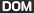
<style>
.page{position:relative;width:34px;height:13px}
.page>*{position:absolute;margin:0}
.t1{font:13.9px "K2D-ExtraBold";color:#ffffff}
</style>
<div class="page">
<p class="t1" style="left:2px;top:1px;width:30px;height:11px">DOM</p>
</div>
